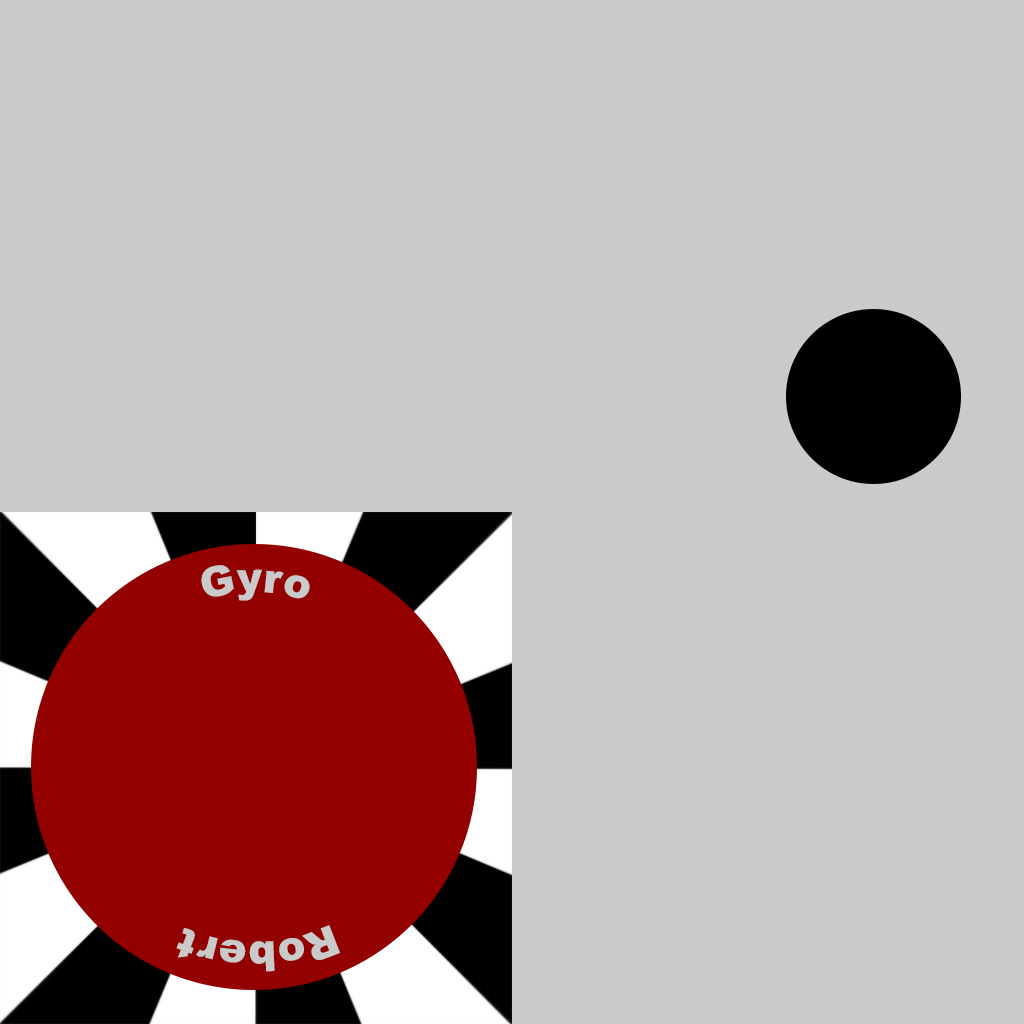
<style>
.page{position:relative;width:1024px;height:1024px;background:#cacaca}
.page>*{position:absolute;margin:0}
.t1{font:41.7px "Arial-Black";color:#cacaca}
</style>
<div class="page">
<p class="t1" style="left:201px;top:565px;width:109px;height:36px">Gyro</p>
<p class="t1" style="left:176px;top:925px;width:164px;height:47px">Robert</p>
</div>
